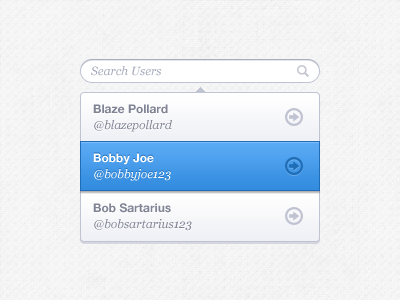
<style>
.page{position:relative;width:400px;height:300px}
.page>*{position:absolute;margin:0}
.t1{font:12px "Georgia-Italic";color:#a7aabc}
.t2{font:12px/16px "HelveticaNeue-Bold";color:#808394}
.t3{font:12px/16px "Georgia-Italic";color:#808394}
.t4{font:12px/16px "Georgia-Italic";color:#ffffff}
.t5{font:12px/16px "HelveticaNeue-Bold";color:#ffffff}
.t6{font:12px/16px "Georgia-Italic";color:#808494}
.t7{font:12px/16px "HelveticaNeue-Bold";color:#808494}
</style>
<div class="page">
<p class="t1" style="left:91px;top:66px;width:71px;height:10px">Search Users</p>
<p class="t2" style="left:93px;top:104px;width:79px;height:28px">Blaze Pollard<br><span class="t3">@blazepollard</span></p>
<p class="t4" style="left:93px;top:153px;width:78px;height:28px"><span class="t5">Bobby Joe<br></span>@bobbyjoe123</p>
<p class="t6" style="left:93px;top:203px;width:99px;height:28px"><span class="t7">Bob Sartarius<br></span>@bobsartarius123</p>
</div>
